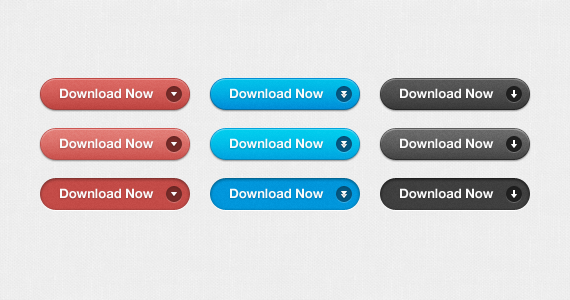
<style>
.page{position:relative;width:570px;height:300px}
.page>*{position:absolute;margin:0}
.t1{font:13px "HelveticaNeue-Bold";color:#fafafa}
</style>
<div class="page">
<p class="t1" style="left:60px;top:88px;width:94px;height:11px">Download Now</p>
<p class="t1" style="left:230px;top:88px;width:94px;height:11px">Download Now</p>
<p class="t1" style="left:400px;top:88px;width:94px;height:11px">Download Now</p>
<p class="t1" style="left:60px;top:138px;width:94px;height:11px">Download Now</p>
<p class="t1" style="left:230px;top:138px;width:94px;height:11px">Download Now</p>
<p class="t1" style="left:400px;top:138px;width:94px;height:11px">Download Now</p>
<p class="t1" style="left:60px;top:188px;width:94px;height:11px">Download Now</p>
<p class="t1" style="left:230px;top:188px;width:94px;height:11px">Download Now</p>
<p class="t1" style="left:400px;top:188px;width:94px;height:11px">Download Now</p>
</div>
